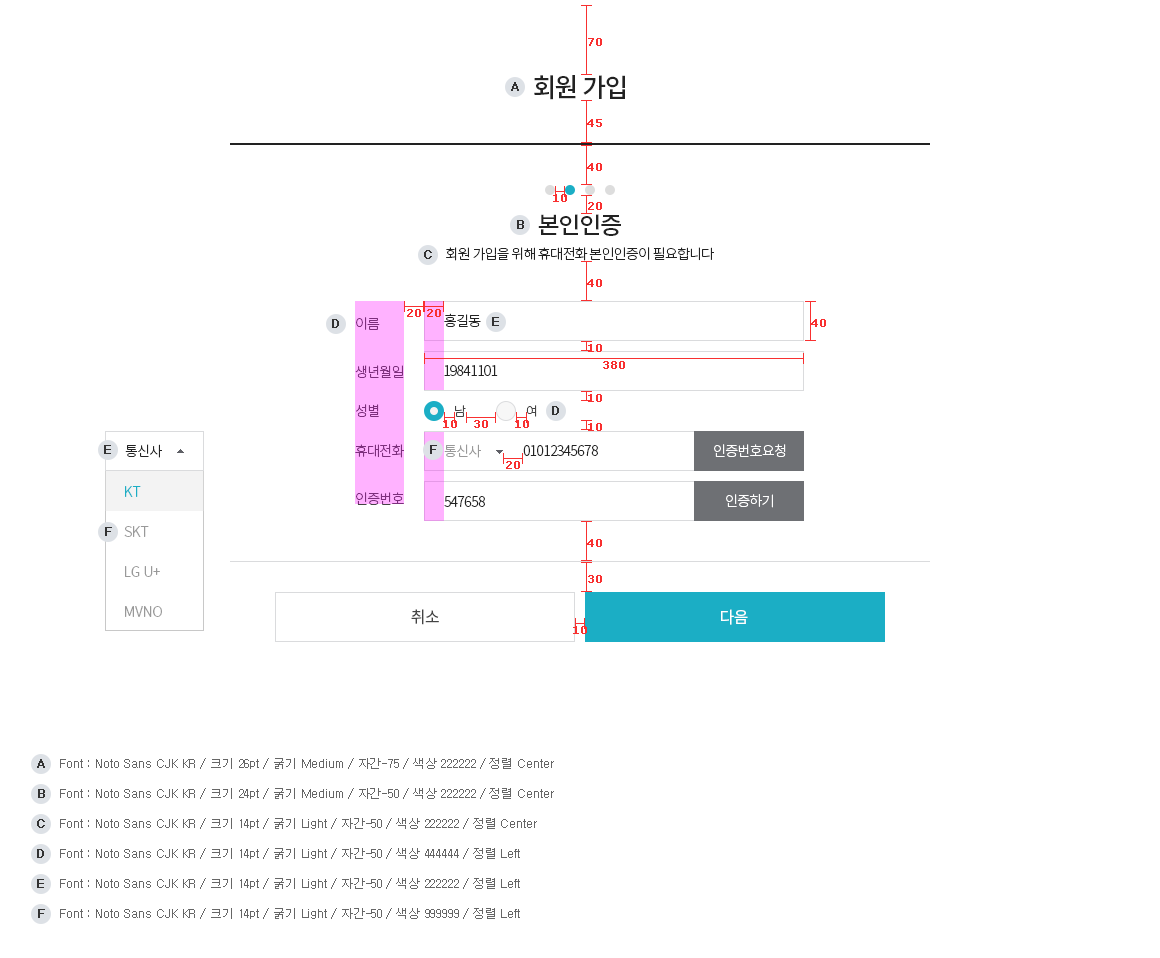
<style>
.page{position:relative;width:1160px;height:958px;background:#ffffff}
.page>*{position:absolute;margin:0}
.t1{font:11px "Verdana";color:#f83030;font-weight:bold}
.t2{font:26px "NotoSansCJKkr-Medium";letter-spacing:-0.075em;color:#222222;text-transform:uppercase}
.t3{font:14px/25px "NotoSansCJKkr-Light";letter-spacing:-0.05em;color:#222222}
.t4{font:24px/25px "NotoSansCJKkr-Medium";letter-spacing:-0.05em;color:#222222}
.t5{font:14px/48px "NotoSansCJKkr-Light";letter-spacing:-0.05em;color:#7c2f7c}
.t6{font:14px "NotoSansCJKkr-Light";letter-spacing:-0.05em;color:#222222}
.t7{font:14px "NotoSansCJKkr-Light";letter-spacing:-0.05em;color:#7c2f7c}
.t8{font:13px "NotoSansCJKkr-Light";letter-spacing:-0.03em;color:#444444}
.t9{font:14px "NotoSansCJKkr-Light";letter-spacing:-0.05em;color:#999999}
.t10{font:14px "NotoSansCJKkr-Light";letter-spacing:-0.05em;color:#ffffff}
.t11{font:14px/40px "NotoSansCJKkr-Light";color:#999999}
.t12{font:14px/40px "NotoSansCJKkr-Light";color:#1baec5}
.t13{font:16px "NotoSansCJKkr-Regular";letter-spacing:-0.05em;color:#444444;text-transform:uppercase}
.t14{font:16px "NotoSansCJKkr-Regular";letter-spacing:-0.05em;color:#ffffff;text-transform:uppercase}
.t15{font:12px "Dotum";color:#323232;font-weight:bold}
.t16{font:12px "Dotum";color:#666666}
.t17{font:12px "Dotum";color:#323232;text-transform:uppercase;font-weight:bold}
</style>
<div class="page">
<p class="t1" style="left:588px;top:38px;width:14px;height:8px">70</p>
<p class="t2" style="left:534px;top:75px;width:91px;height:25px">회원 가입</p>
<p class="t1" style="left:587px;top:119px;width:15px;height:8px">45</p>
<p class="t1" style="left:587px;top:163px;width:15px;height:8px">40</p>
<p class="t1" style="left:553px;top:194px;width:14px;height:8px">10</p>
<p class="t1" style="left:588px;top:202px;width:14px;height:8px">20</p>
<p class="t3" style="left:446px;top:214px;width:268px;height:47px;text-align:center"><span class="t4">본인인증<br></span>회원 가입을 위해 휴대전화 본인인증이 필요합니다</p>
<p class="t1" style="left:587px;top:279px;width:15px;height:8px">40</p>
<p class="t5" style="left:355px;top:317px;width:49px;height:61px">이름<br>생년월일</p>
<p class="t1" style="left:407px;top:309px;width:14px;height:8px">20</p>
<p class="t6" style="left:444px;top:313px;width:37px;height:14px">홍길동</p>
<p class="t1" style="left:811px;top:319px;width:15px;height:8px">40</p>
<p class="t1" style="left:588px;top:344px;width:14px;height:8px">10</p>
<p class="t6" style="left:444px;top:365px;width:54px;height:11px">19841101</p>
<p class="t1" style="left:603px;top:361px;width:22px;height:8px">380</p>
<p class="t1" style="left:588px;top:394px;width:14px;height:8px">10</p>
<p class="t7" style="left:356px;top:404px;width:23px;height:13px">성별</p>
<p class="t8" style="left:455px;top:405px;width:11px;height:12px">남</p>
<p class="t8" style="left:526px;top:405px;width:11px;height:12px">여</p>
<p class="t1" style="left:443px;top:420px;width:14px;height:8px">10</p>
<p class="t1" style="left:474px;top:420px;width:14px;height:8px">30</p>
<p class="t1" style="left:515px;top:420px;width:14px;height:8px">10</p>
<p class="t1" style="left:588px;top:423px;width:14px;height:8px">10</p>
<p class="t6" style="left:125px;top:444px;width:37px;height:14px">통신사</p>
<p class="t5" style="left:355px;top:444px;width:49px;height:61px">휴대전화<br>인증번호</p>
<p class="t9" style="left:444px;top:444px;width:37px;height:14px">통신사</p>
<p class="t6" style="left:523px;top:445px;width:75px;height:11px">01012345678</p>
<p class="t10" style="left:714px;top:444px;width:72px;height:13px">인증번호요청</p>
<p class="t1" style="left:506px;top:461px;width:14px;height:8px">20</p>
<p class="t11" style="left:124px;top:486px;width:38px;height:131px"><span class="t12">KT<br></span>SKT<br>LG U+ <br>MVNO</p>
<p class="t6" style="left:444px;top:496px;width:41px;height:11px">547658</p>
<p class="t10" style="left:726px;top:494px;width:47px;height:14px">인증하기</p>
<p class="t1" style="left:588px;top:575px;width:14px;height:8px">30</p>
<p class="t13" style="left:411px;top:609px;width:28px;height:16px">취소</p>
<p class="t14" style="left:721px;top:609px;width:27px;height:16px">다음</p>
<p class="t1" style="left:573px;top:626px;width:14px;height:8px">10</p>
<p class="t15" style="left:37px;top:759px;width:8px;height:9px">A</p>
<p class="t16" style="left:60px;top:758px;width:494px;height:11px">Font : Noto Sans CJK KR / 크기 26pt / 굵기 Medium / 자간-75 / 색상 222222 / 정렬 Center</p>
<p class="t15" style="left:38px;top:789px;width:7px;height:9px">B</p>
<p class="t16" style="left:60px;top:788px;width:494px;height:11px">Font : Noto Sans CJK KR / 크기 24pt / 굵기 Medium / 자간-50 / 색상 222222 / 정렬 Center</p>
<p class="t17" style="left:37px;top:819px;width:8px;height:9px">c</p>
<p class="t16" style="left:60px;top:818px;width:477px;height:11px">Font : Noto Sans CJK KR / 크기 14pt / 굵기 Light / 자간-50 / 색상 222222 / 정렬 Center</p>
<p class="t17" style="left:37px;top:849px;width:7px;height:9px">d</p>
<p class="t16" style="left:60px;top:848px;width:460px;height:11px">Font : Noto Sans CJK KR / 크기 14pt / 굵기 Light / 자간-50 / 색상 444444 / 정렬 Left</p>
<p class="t17" style="left:37px;top:879px;width:7px;height:9px">e</p>
<p class="t16" style="left:60px;top:878px;width:460px;height:11px">Font : Noto Sans CJK KR / 크기 14pt / 굵기 Light / 자간-50 / 색상 222222 / 정렬 Left</p>
<p class="t17" style="left:38px;top:909px;width:7px;height:9px">f</p>
<p class="t16" style="left:60px;top:908px;width:460px;height:11px">Font : Noto Sans CJK KR / 크기 14pt / 굵기 Light / 자간-50 / 색상 999999 / 정렬 Left</p>
</div>
